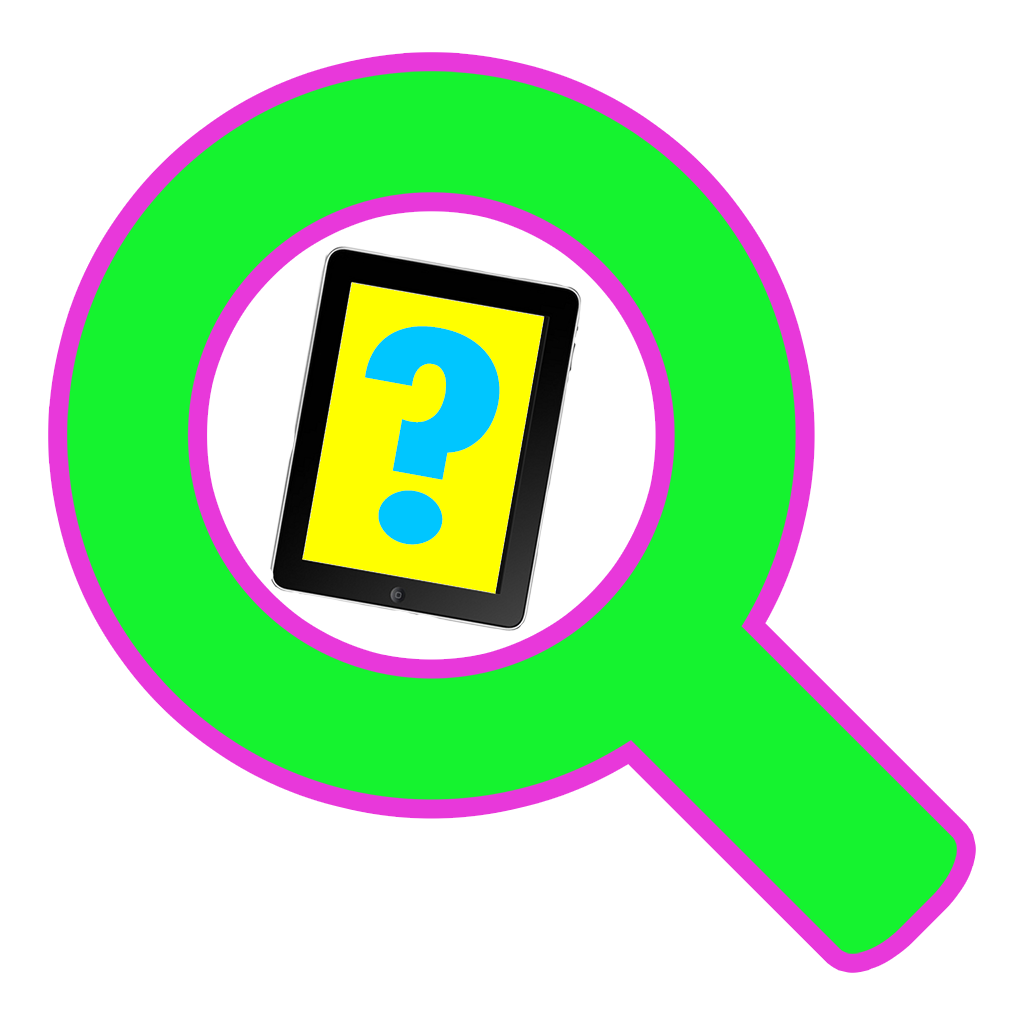
<style>
.page{position:relative;width:1024px;height:1024px;background:#ffffff}
.page>*{position:absolute;margin:0}
.t1{font:280.9px "FuturaLT-CondensedBold";color:#00c6ff;scale:1.2 1}
</style>
<div class="page">
<p class="t1" style="left:365px;top:326px;width:135px;height:219px;rotate:10deg">?</p>
</div>
